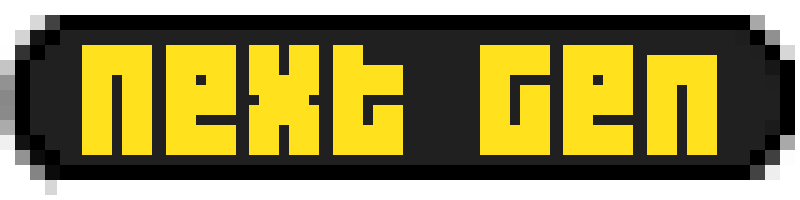
<style>
.page{position:relative;width:800px;height:200px;background:#202020}
.page>*{position:absolute;margin:0}
.t1{font:140px "04b19";letter-spacing:0.025em;color:#ffe21d}
</style>
<div class="page">
<p class="t1" style="left:82px;top:45px;width:635px;height:110px">Next Gen</p>
</div>
